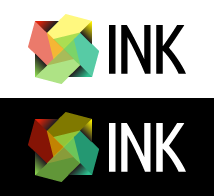
<style>
.page{position:relative;width:214px;height:196px;background:#ffffff}
.page>*{position:absolute;margin:0}
.t1{font:70px "UbuntuCondensed-Regular";letter-spacing:-0.08em;color:#000000}
.t2{font:70px "UbuntuCondensed-Regular";letter-spacing:-0.08em;color:#ffffff}
</style>
<div class="page">
<p class="t1" style="left:109px;top:25px;width:77px;height:49px">INK</p>
<p class="t2" style="left:109px;top:123px;width:77px;height:49px">INK</p>
</div>
